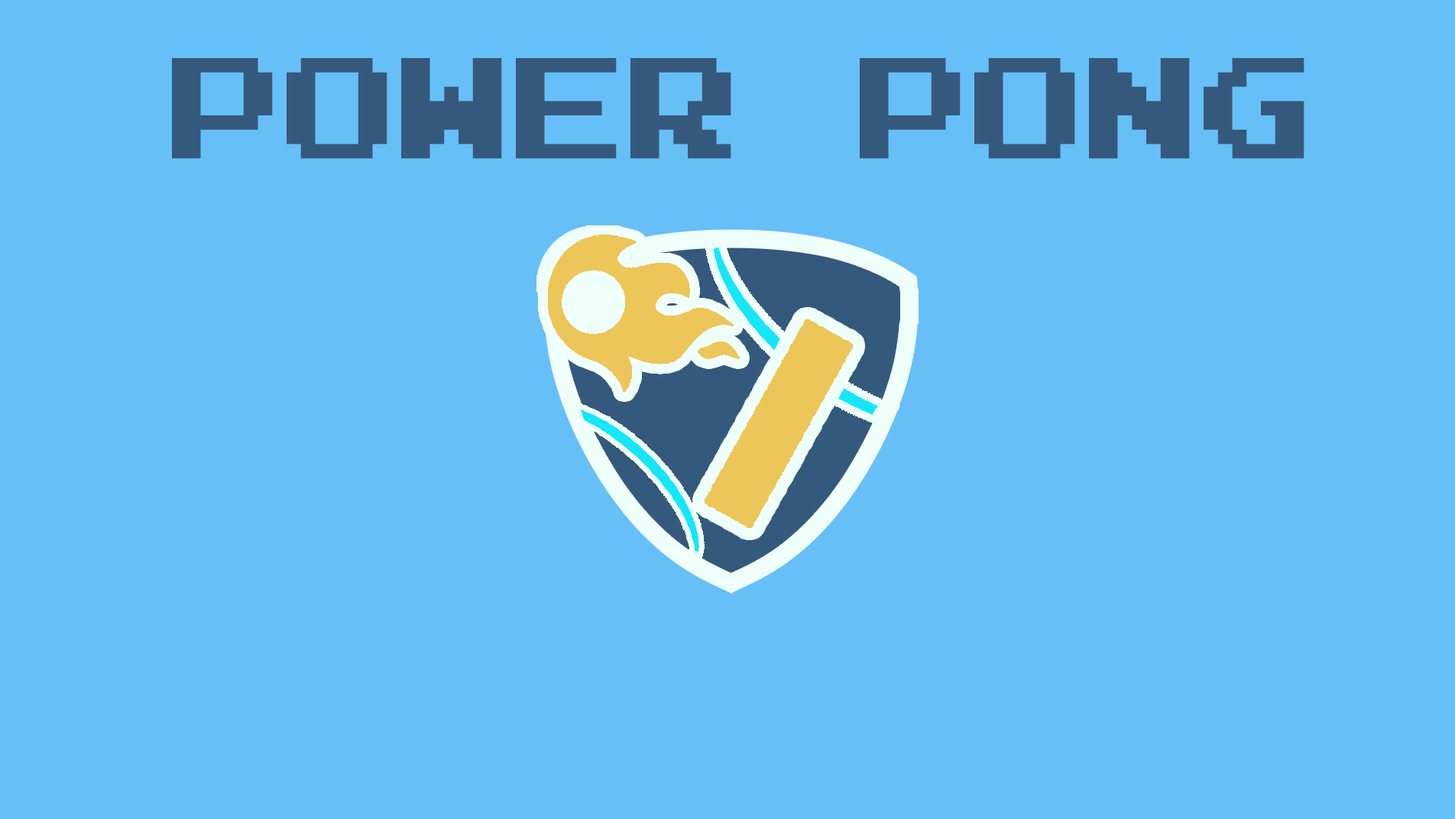
<style>
.page{position:relative;width:1455px;height:819px;background:#67bff7}
.page>*{position:absolute;margin:0}
.t1{font:114.7px "PressStart2P";color:#35597c}
</style>
<div class="page">
<p class="t1" style="left:172px;top:58px;width:1133px;height:101px">POWER PONG</p>
</div>
